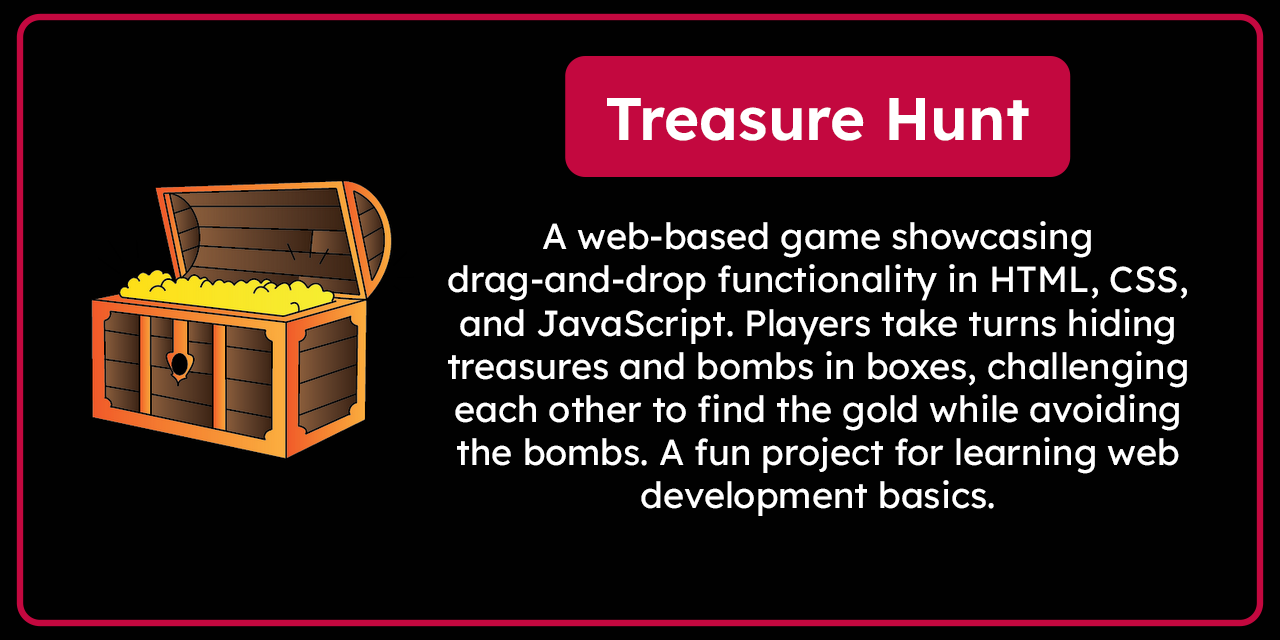
<style>
.page{position:relative;width:1280px;height:640px;background:#010101}
.page>*{position:absolute;margin:0}
.t1{font:60px "Lexend-SemiBold";color:#ffffff}
.t2{font:36px "Lexend-Regular";color:#ffffff}
</style>
<div class="page">
<p class="t1" style="left:607px;top:98px;width:422px;height:43px">Treasure Hunt</p>
<p class="t2" style="left:448px;top:221px;width:739px;height:295px;text-align:center">A web-based game showcasing drag-and-drop functionality in HTML, CSS, and JavaScript. Players take turns hiding treasures and bombs in boxes, challenging each other to find the gold while avoiding the bombs. A fun project for learning web development basics.</p>
</div>
